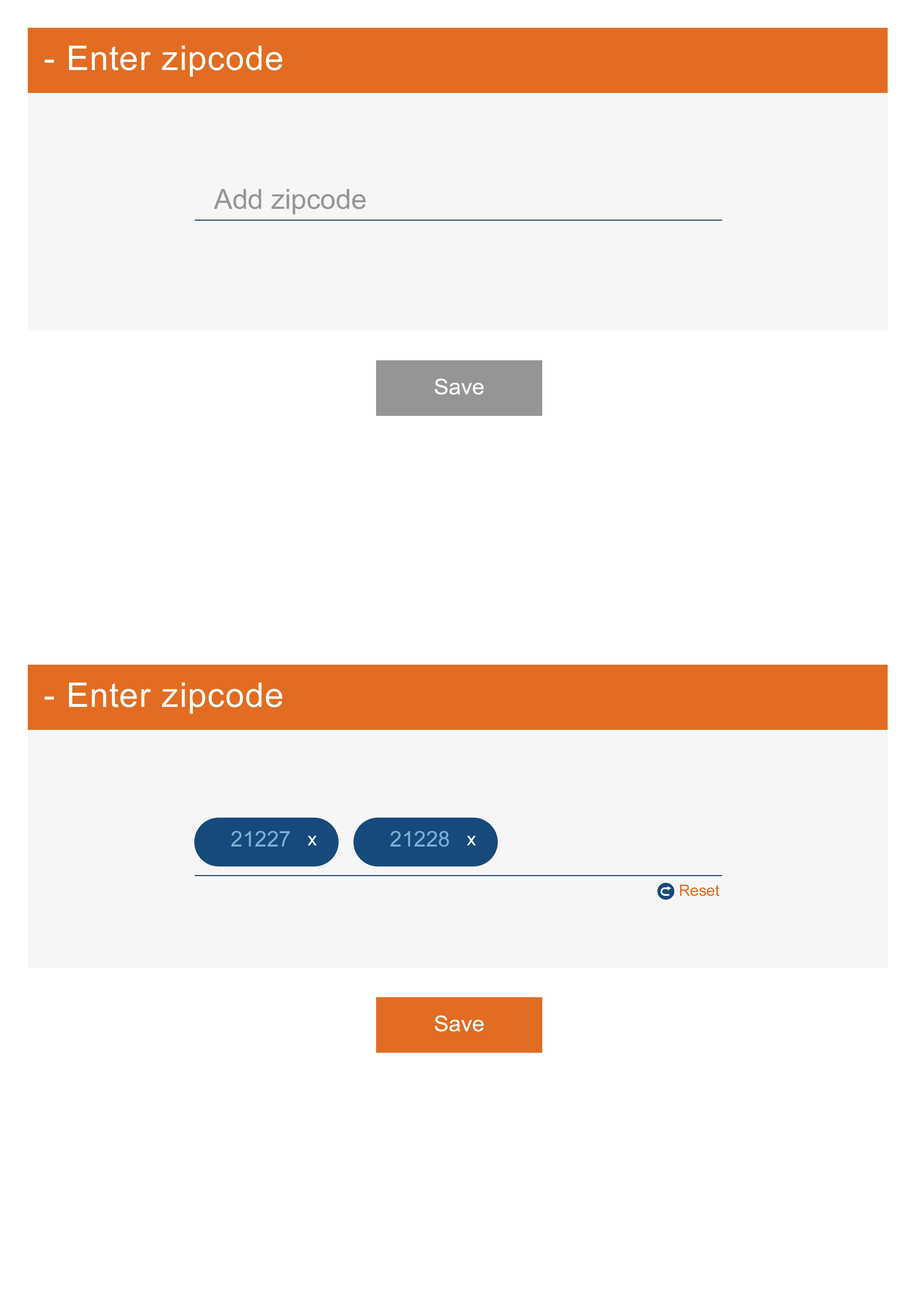
<style>
.page{position:relative;width:918px;height:1299px;background:#ffffff}
.page>*{position:absolute;margin:0}
.t1{font:33.9px "ArialMT";letter-spacing:0.025em;color:#ffffff}
.t2{font:27.8px "ArialMT";color:#959595}
.t3{font:21.6px "ArialMT";color:#ffffff}
.t4{font:21.6px "ArialMT";color:#7bb3d7}
.t5{font:18.5px "ArialMT";color:#ffffff}
.t6{font:15.4px "ArialMT";color:#e26d22}
</style>
<div class="page">
<p class="t1" style="left:44px;top:46px;width:238px;height:31px">- Enter zipcode</p>
<p class="t2" style="left:214px;top:189px;width:152px;height:25px">Add zipcode</p>
<p class="t3" style="left:435px;top:378px;width:49px;height:17px">Save</p>
<p class="t1" style="left:44px;top:682px;width:238px;height:32px">- Enter zipcode</p>
<p class="t4" style="left:231px;top:831px;width:59px;height:15px">21227</p>
<p class="t4" style="left:390px;top:831px;width:59px;height:16px">21228</p>
<p class="t5" style="left:308px;top:836px;width:9px;height:9px">x</p>
<p class="t5" style="left:467px;top:836px;width:9px;height:9px">x</p>
<p class="t6" style="left:680px;top:884px;width:40px;height:12px">Reset</p>
<p class="t3" style="left:435px;top:1015px;width:49px;height:16px">Save</p>
</div>
